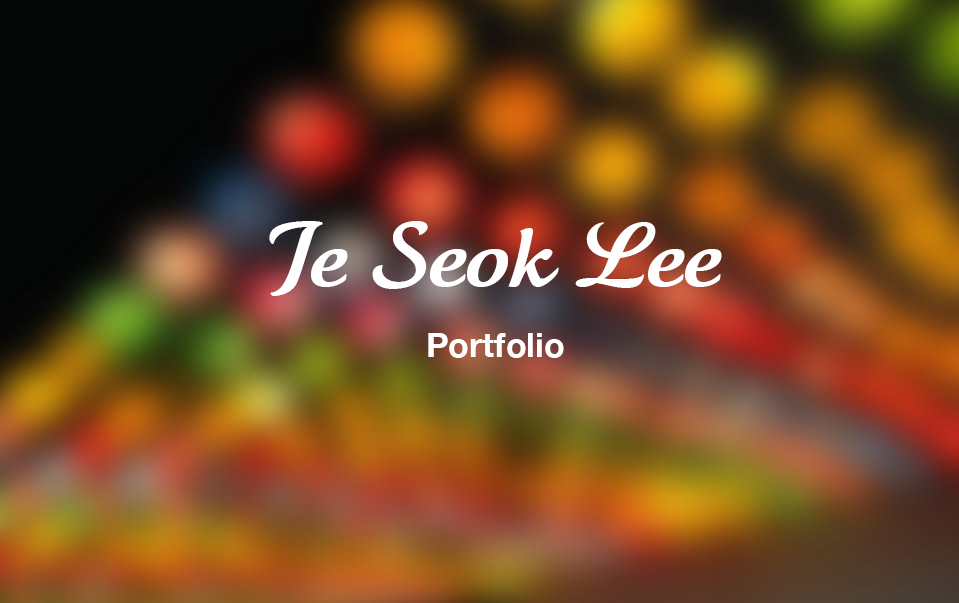
<style>
.page{position:relative;width:959px;height:603px}
.page>*{position:absolute;margin:0}
.t1{font:90px "TartineScriptRegular";color:#ffffff;scale:1.1 1}
.t2{font:34px "HelveticaNeue-Bold";color:#ffffff}
</style>
<div class="page">
<p class="t1" style="left:269px;top:221px;width:453px;height:75px">Je Seok Lee</p>
<p class="t2" style="left:428px;top:333px;width:136px;height:25px">Portfolio</p>
</div>
